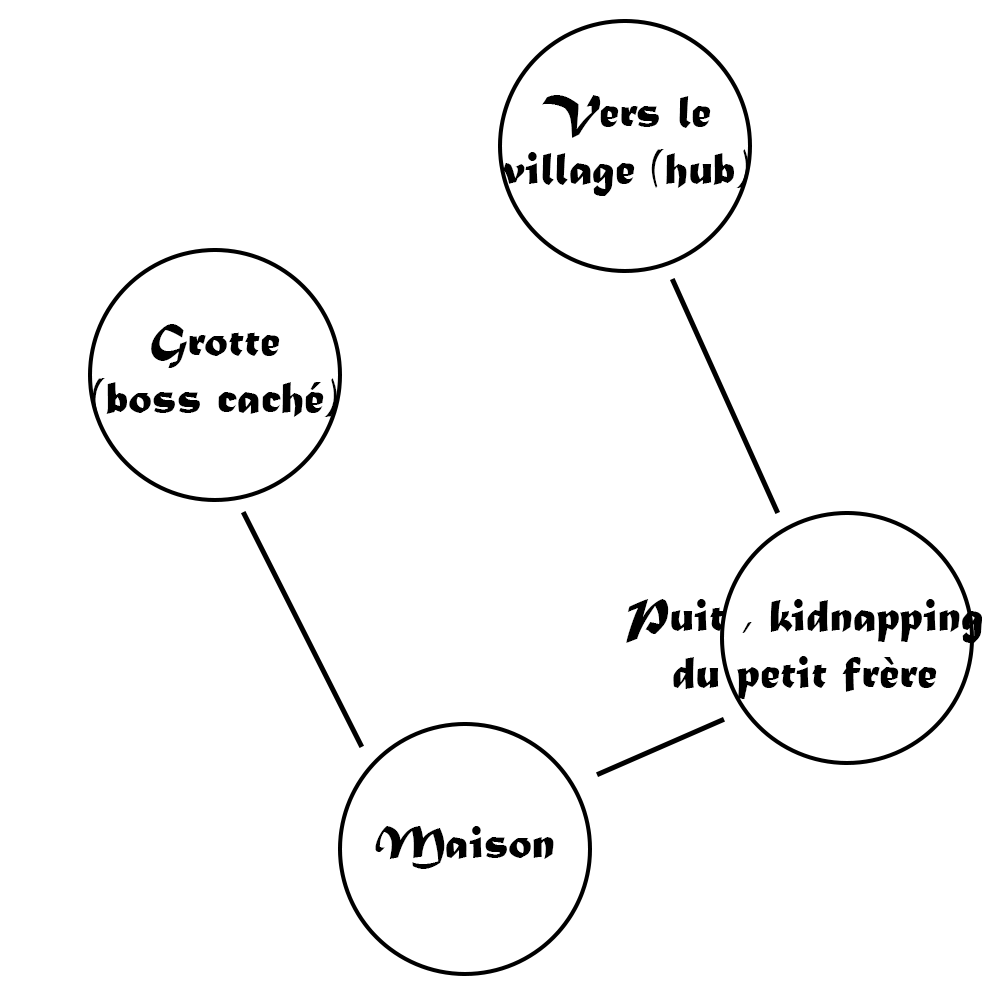
<style>
.page{position:relative;width:1000px;height:1000px;background:#ffffff}
.page>*{position:absolute;margin:0}
.t1{font:48px "MaturaMTScriptCapitals";color:#000000}
</style>
<div class="page">
<p class="t1" style="left:503px;top:95px;width:246px;height:101px;text-align:center">Vers le<br>village (hub)</p>
<p class="t1" style="left:92px;top:324px;width:245px;height:93px;text-align:center">Grotte<br>(boss caché)</p>
<p class="t1" style="left:626px;top:599px;width:356px;height:100px;text-align:center">Puit , kidnapping<br>du petit frère</p>
<p class="t1" style="left:375px;top:826px;width:179px;height:43px">Maison</p>
</div>
